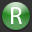
<style>
.page{position:relative;width:32px;height:32px;background:#333333}
.page>*{position:absolute;margin:0}
.t1{font:24px "MyriadPro-Regular";color:#ffffff}
</style>
<div class="page">
<p class="t1" style="left:11px;top:7px;width:11px;height:17px">R</p>
</div>
